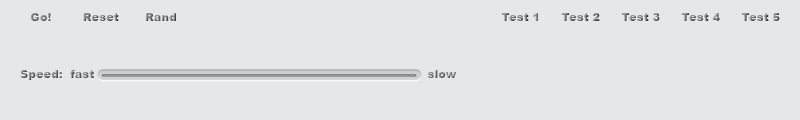
<style>
.page{position:relative;width:800px;height:120px;background:#e6e7e9}
.page>*{position:absolute;margin:0}
.t1{font:11.5px "Arial-Black";color:#868686}
.t2{font:11.5px "Arial-Black"}
</style>
<div class="page">
<p class="t1" style="left:30px;top:13px;width:21px;height:8px">Go!</p>
<p class="t2" style="left:83px;top:13px;width:36px;height:8px">Reset</p>
<p class="t2" style="left:145px;top:13px;width:31px;height:8px">Rand</p>
<p class="t1" style="left:501px;top:13px;width:37px;height:8px">Test 1</p>
<p class="t2" style="left:561px;top:13px;width:39px;height:8px">Test 2</p>
<p class="t2" style="left:621px;top:13px;width:39px;height:8px">Test 3</p>
<p class="t2" style="left:681px;top:13px;width:39px;height:8px">Test 4</p>
<p class="t2" style="left:741px;top:13px;width:39px;height:8px">Test 5</p>
<p class="t1" style="left:20px;top:70px;width:436px;height:10px">Speed:  fast            slow</p>
</div>
